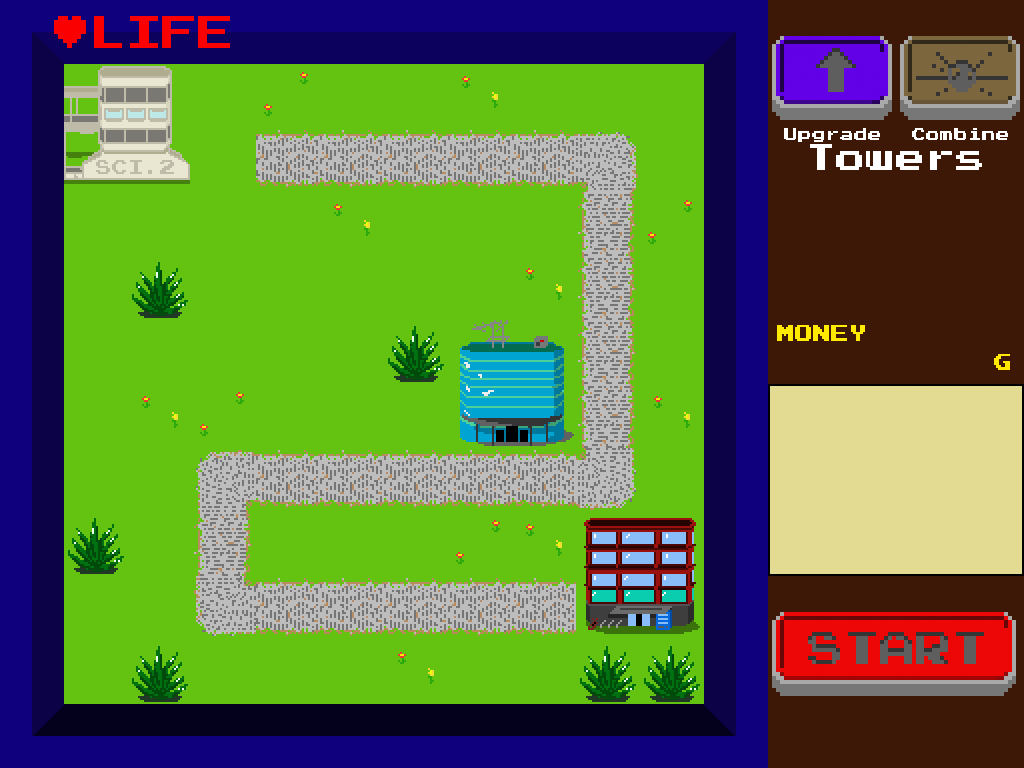
<style>
.page{position:relative;width:1024px;height:768px;background:#64c310}
.page>*{position:absolute;margin:0}
.t1{font:36px "PressStart2P";color:#fa0000}
.t2{font:14px "PressStart2P";color:#ffffff}
.t3{font:30px "PressStart2P";color:#ffffff}
.t4{font:18px "PressStart2P";color:#ffea00}
</style>
<div class="page">
<p class="t1" style="left:54px;top:16px;width:176px;height:32px">♥LIFE</p>
<p class="t2" style="left:784px;top:128px;width:96px;height:14px">Upgrade</p>
<p class="t2" style="left:912px;top:128px;width:96px;height:12px">Combine</p>
<p class="t3" style="left:810px;top:144px;width:172px;height:26px">Towers</p>
<p class="t4" style="left:777px;top:325px;width:88px;height:16px">MONEY</p>
<p class="t4" style="left:994px;top:354px;width:16px;height:16px">G</p>
</div>
